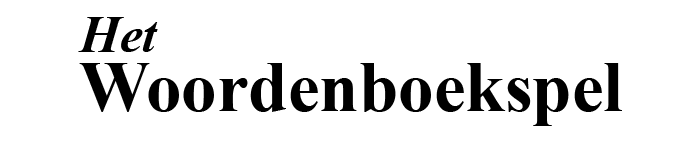
<style>
.page{position:relative;width:700px;height:144px;background:#ffffff}
.page>*{position:absolute;margin:0}
.t1{font:51px "TimesNewRomanPS-BoldItalicMT";color:#000000}
.t2{font:70.9px "TimesNewRomanPS-BoldMT";color:#000000}
</style>
<div class="page">
<p class="t1" style="left:78px;top:17px;width:80px;height:35px">Het</p>
<p class="t2" style="left:79px;top:63px;width:543px;height:63px">Woordenboekspel</p>
</div>
